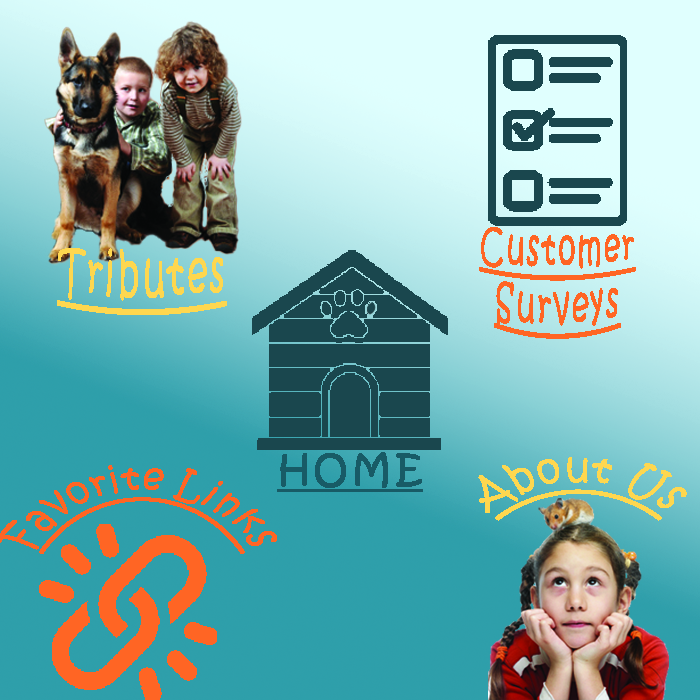
<style>
.page{position:relative;width:700px;height:700px}
.page>*{position:absolute;margin:0}
.t1{font:27.4px "KristenITC-Regular";letter-spacing:0.1em;color:#ff6524;text-decoration:underline}
.t2{font:33.5px "KristenITC-Regular";letter-spacing:0.1em;color:#fed74f;text-decoration:underline}
.t3{font:36.7px "KristenITC-Regular";letter-spacing:0.1em;color:#185b66;font-weight:bold;text-decoration:underline}
.t4{font:23.2px "KristenITC-Regular";letter-spacing:0.1em;color:#fed74f;text-decoration:underline}
</style>
<div class="page">
<p class="t1" style="left:479px;top:227px;width:157px;height:112px;text-align:center">Customer Surveys</p>
<p class="t2" style="left:57px;top:248px;width:170px;height:67px;text-align:center">Tributes</p>
<p class="t3" style="left:277px;top:452px;width:146px;height:40px">HOME</p>
<p class="t4" style="left:478px;top:457px;width:209px;height:64px;text-align:center">About Us</p>
</div>
